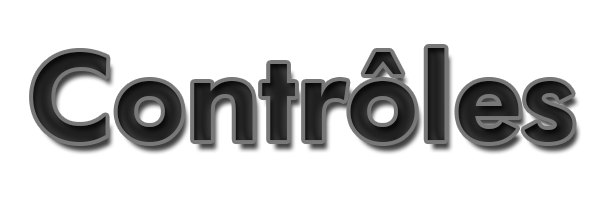
<style>
.page{position:relative;width:600px;height:200px;background:#ffffff}
.page>*{position:absolute;margin:0}
.t1{font:120px "FuturaBT-Heavy";color:#212121}
</style>
<div class="page">
<p class="t1" style="left:33px;top:48px;width:540px;height:94px">Contrôles</p>
</div>
